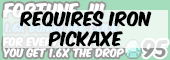
<style>
.page{position:relative;width:170px;height:60px}
.page>*{position:absolute;margin:0}
.t1{font:17px "KomikaAxis";color:#000000}
.t2{font:9.9px "KomikaAxis";color:#ffffff}
.t3{font:20.1px "KomikaAxis"}
</style>
<div class="page">
<p class="t1" style="left:20px;top:10px;width:132px;height:37px;text-align:center">requires iron<br>pickaxe</p>
<p class="t2" style="left:3px;top:37px;width:121px;height:21px">for every click,<br>you get 1.6x the drop</p>
<p class="t3" style="left:142px;top:39px;width:26px;height:19px">95</p>
</div>
